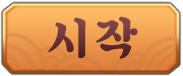
<style>
.page{position:relative;width:183px;height:76px}
.page>*{position:absolute;margin:0}
.t1{font:46.1px "SDKukdetopokki-bBd";letter-spacing:0.12em;color:#6d3638}
</style>
<div class="page">
<p class="t1" style="left:48px;top:16px;width:90px;height:43px">시작</p>
</div>
